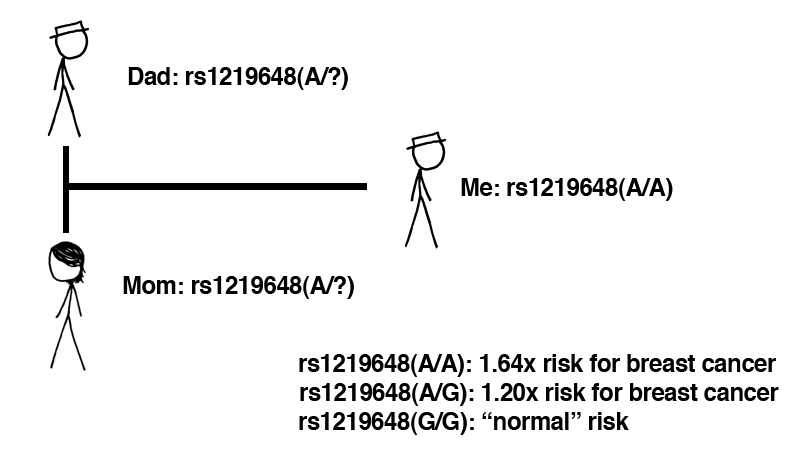
<style>
.page{position:relative;width:800px;height:454px;background:#ffffff}
.page>*{position:absolute;margin:0}
.t1{font:24px "Helvetica-Bold";letter-spacing:-0.02em;color:#000000}
</style>
<div class="page">
<p class="t1" style="left:128px;top:67px;width:220px;height:23px">Dad: rs1219648(A/?)</p>
<p class="t1" style="left:461px;top:178px;width:212px;height:23px">Me: rs1219648(A/A)</p>
<p class="t1" style="left:123px;top:276px;width:231px;height:23px">Mom: rs1219648(A/?)</p>
<p class="t1" style="left:299px;top:354px;width:480px;height:81px">rs1219648(A/A): 1.64x risk for breast cancer<br>rs1219648(A/G): 1.20x risk for breast cancer<br>rs1219648(G/G): “normal” risk</p>
</div>
